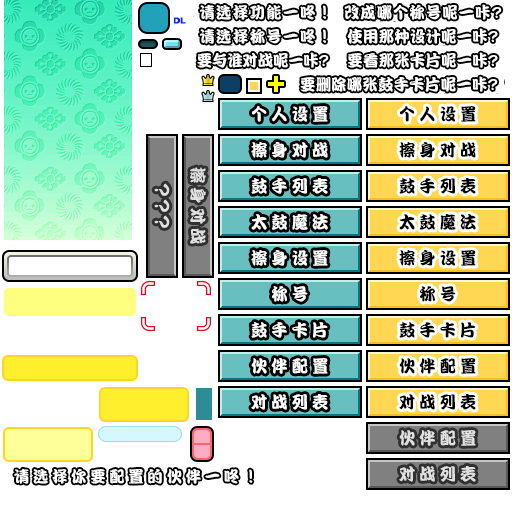
<style>
.page{position:relative;width:512px;height:512px;background:#ffffff}
.page>*{position:absolute;margin:0}
.t1{font:16px "DFPKanTingLiuW9";letter-spacing:0.1em;color:#ffffff;scale:0.96 1}
.t2{font:16px "DFPKanTingLiuW9";letter-spacing:0.075em;color:#ffffff;scale:0.96 1}
.t3{font:16px "DFPKanTingLiuW9";letter-spacing:0.025em;color:#ffffff;scale:0.96 1}
.t4{font:16px "DFPKanTingLiuW9";color:#ffffff;scale:0.96 1}
.t5{font:17px "DFPKanTingLiuW9";letter-spacing:0.25em;color:#ffffff;scale:0.96 1}
.t6{font:17px "DFPKanTingLiuW9";letter-spacing:0.25em;color:#000000;scale:0.96 1}
.t7{font:17px "DFPKanTingLiuW9";letter-spacing:0.25em;color:#e0e0e0;scale:0.96 1}
.t8{font:16px "DFPKanTingLiuW9";letter-spacing:0.25em;color:#ffffff;scale:0.96 1}
</style>
<div class="page">
<p class="t1" style="left:200px;top:4px;width:126px;height:16px">请选择功能一咚！</p>
<p class="t2" style="left:344px;top:4px;width:158px;height:16px">改成哪个称号呢一咔?</p>
<p class="t1" style="left:200px;top:28px;width:126px;height:16px">请选择称号一咚！</p>
<p class="t3" style="left:347px;top:28px;width:151px;height:16px">使用那种设计呢一咔?</p>
<p class="t4" style="left:197px;top:52px;width:132px;height:16px">要与谁对战呢一咔?</p>
<p class="t3" style="left:348px;top:52px;width:150px;height:16px">要看那张卡片呢一咔?</p>
<p class="t3" style="left:300px;top:76px;width:198px;height:16px">要删除哪张鼓手卡片呢一咔?</p>
<p class="t5" style="left:252px;top:106px;width:76px;height:16px">个人设置</p>
<p class="t6" style="left:400px;top:106px;width:76px;height:16px">个人设置</p>
<p class="t5" style="left:251px;top:142px;width:77px;height:16px">擦身对战</p>
<p class="t6" style="left:399px;top:142px;width:77px;height:16px">擦身对战</p>
<p class="t7" style="left:190px;top:167px;width:16px;height:77px;rotate:90deg">擦身对战</p>
<p class="t5" style="left:251px;top:178px;width:77px;height:16px">鼓手列表</p>
<p class="t6" style="left:399px;top:178px;width:77px;height:16px">鼓手列表</p>
<p class="t5" style="left:251px;top:214px;width:77px;height:16px">太鼓魔法</p>
<p class="t6" style="left:399px;top:214px;width:77px;height:16px">太鼓魔法</p>
<p class="t5" style="left:251px;top:250px;width:77px;height:16px">擦身设置</p>
<p class="t6" style="left:399px;top:250px;width:77px;height:16px">擦身设置</p>
<p class="t5" style="left:272px;top:286px;width:36px;height:16px">称号</p>
<p class="t6" style="left:420px;top:286px;width:36px;height:16px">称号</p>
<p class="t5" style="left:251px;top:322px;width:77px;height:16px">鼓手卡片</p>
<p class="t6" style="left:399px;top:322px;width:77px;height:16px">鼓手卡片</p>
<p class="t5" style="left:251px;top:358px;width:77px;height:16px">伙伴配置</p>
<p class="t6" style="left:399px;top:358px;width:77px;height:16px">伙伴配置</p>
<p class="t5" style="left:251px;top:394px;width:77px;height:16px">对战列表</p>
<p class="t6" style="left:399px;top:394px;width:77px;height:16px">对战列表</p>
<p class="t7" style="left:399px;top:430px;width:77px;height:16px">伙伴配置</p>
<p class="t8" style="left:14px;top:468px;width:239px;height:16px">请选择你要配置的伙伴一咚！</p>
<p class="t7" style="left:399px;top:466px;width:77px;height:16px">对战列表</p>
</div>
